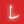
<style>
.page{position:relative;width:24px;height:24px;background:#d62629}
.page>*{position:absolute;margin:0}
.t1{font:18.7px "SketchFlowPrint";color:#ffffff}
</style>
<div class="page">
<p class="t1" style="left:9px;top:5px;width:10px;height:14px">L</p>
</div>
